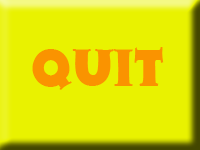
<style>
.page{position:relative;width:200px;height:150px;background:#e9f200}
.page>*{position:absolute;margin:0}
.t1{font:50px "Colbert";color:#fa9300}
</style>
<div class="page">
<p class="t1" style="left:32px;top:47px;width:132px;height:43px">QUIT</p>
</div>
